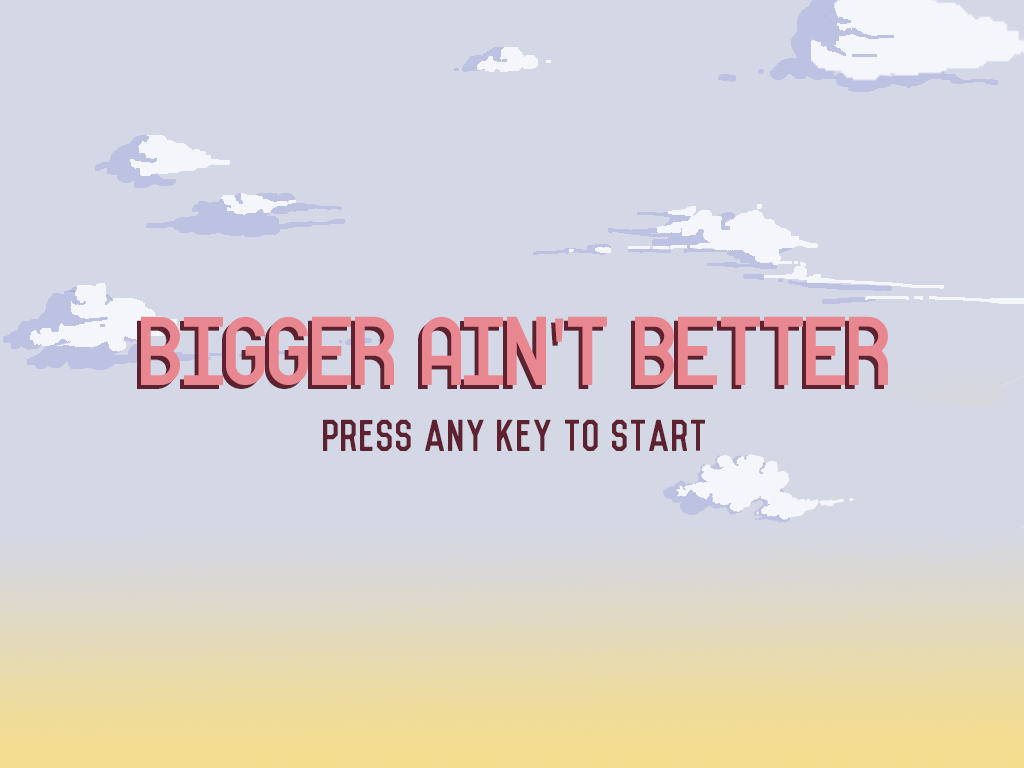
<style>
.page{position:relative;width:1024px;height:768px;background:#d4d7e5}
.page>*{position:absolute;margin:0}
.t1{font:97.3px "Woodhouse";color:#e88790}
.t2{font:97.3px "MyriadPro-Regular";color:#e88790}
.t3{font:97.3px "Woodhouse"}
.t4{font:97.3px "MyriadPro-Regular"}
.t5{font:41px "Vincent-Regular";color:#5d212f}
</style>
<div class="page">
<p class="t1" style="left:141px;top:316px;width:747px;height:69px">Bigger Ain<span class="t2">'</span>T BETTER</p>
<p class="t3" style="left:137px;top:320px;width:747px;height:69px">Bigger Ain<span class="t4">'</span>T BETTER</p>
<p class="t5" style="left:323px;top:419px;width:382px;height:32px">Press any key to start</p>
</div>
